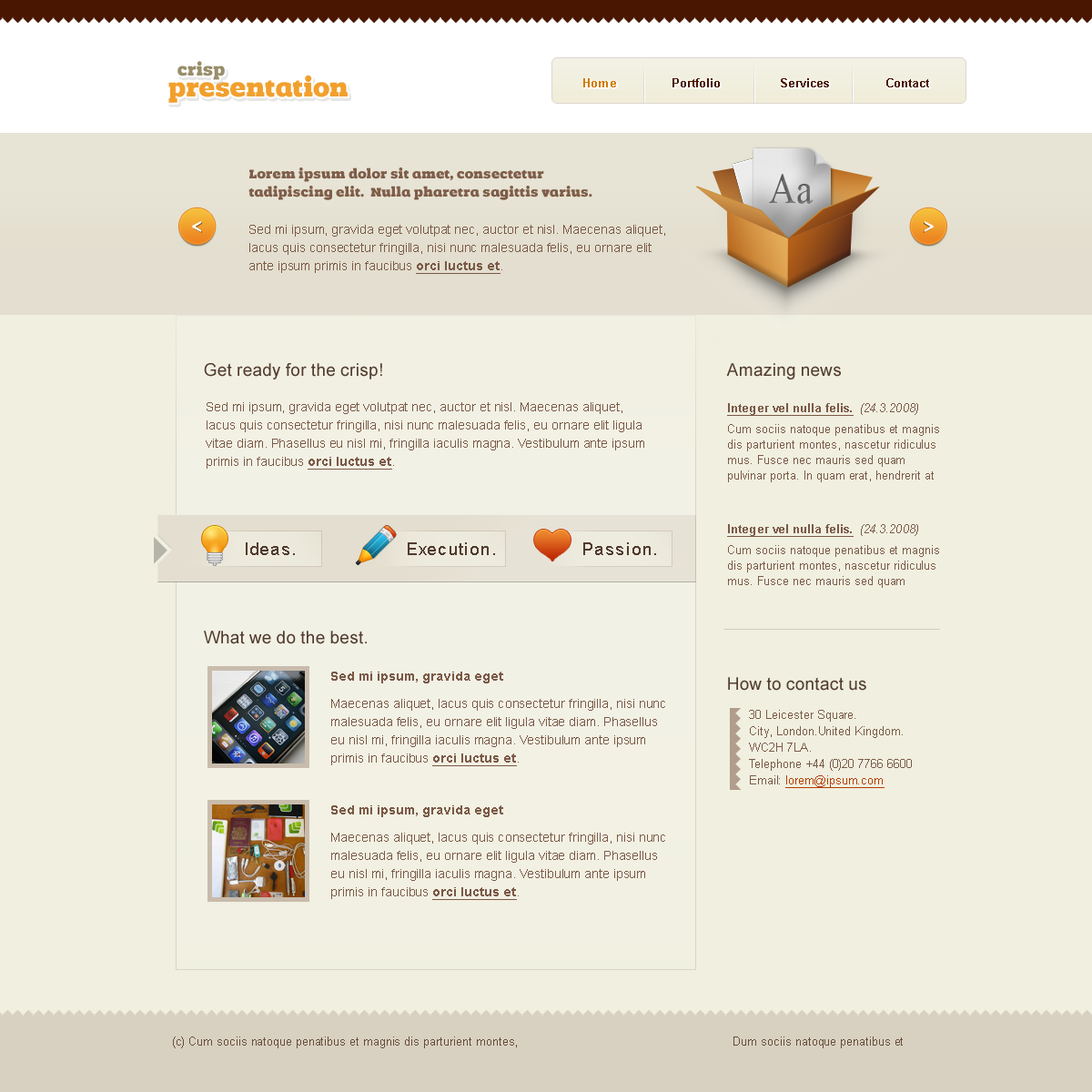
<style>
.page{position:relative;width:1092px;height:1092px;background:#f0efe0}
.page>*{position:absolute;margin:0}
.t1{font:17.6px "Romeral";color:#998d6a}
.t2{font:26.1px "Romeral";color:#f1a02d}
.t3{font:11.8px "Arial-BoldMT";color:#d17b00}
.t4{font:11.8px "Arial-BoldMT";color:#491701}
.t5{font:13.4px/18.2px "Romeral";color:#7f5d49}
.t6{font:41px "TimesNewRomanPSMT";color:#666666;scale:0.91 1}
.t7{font:12.7px/18.2px "ArialMT";color:#7b5a47}
.t8{font:12.7px/18.2px "Arial-BoldMT";color:#7b5a47;text-decoration:underline}
.t9{font:12.7px "ArialMT";color:#7b5a47}
.t10{font:17.2px "ArialMT";color:#523c2f}
.t11{font:11.8px/15.5px "ArialMT";color:#7b5a47}
.t12{font:11.8px/15.5px "Arial-BoldMT";color:#7b5a47;text-decoration:underline}
.t13{font:11.8px/15.5px "Arial-ItalicMT";color:#7b5a47}
.t14{font:11.8px/20.9px "ArialMT";color:#7b5a47}
.t15{font:12.7px/18.2px "Arial-BoldMT";color:#7b5a47}
.t16{font:11.8px/16.4px "ArialMT";color:#7b5a47}
.t17{font:11.8px/16.4px "ArialMT";color:#b44000;text-decoration:underline}
.t18{font:11.8px "ArialMT";color:#694d3c}
</style>
<div class="page">
<p class="t1" style="left:177px;top:61px;width:48px;height:19px">crisp</p>
<p class="t2" style="left:168px;top:75px;width:180px;height:28px">presentation</p>
<p class="t3" style="left:583px;top:78px;width:33px;height:9px">Home</p>
<p class="t4" style="left:672px;top:78px;width:48px;height:9px">Portfolio</p>
<p class="t4" style="left:781px;top:78px;width:48px;height:9px">Services</p>
<p class="t4" style="left:886px;top:78px;width:43px;height:9px">Contact</p>
<p class="t5" style="left:248px;top:167px;width:344px;height:33px">Lorem ipsum dolor sit amet, consectetur <br>tadipiscing elit.  Nulla pharetra sagittis varius.</p>
<p class="t6" style="left:769px;top:174px;width:45px;height:30px">Aa</p>
<p class="t7" style="left:249px;top:225px;width:416px;height:49px">Sed mi ipsum, gravida eget volutpat nec, auctor et nisl. Maecenas aliquet, lacus quis consectetur fringilla, nisi nunc malesuada felis, eu ornare elit ante ipsum primis in faucibus <span class="t8">orci luctus et</span>.<br><span class="t9"><br><br>ultrices posuere cubilia Curae;</span></p>
<p class="t10" style="left:204px;top:363px;width:178px;height:16px">Get ready for the crisp!</p>
<p class="t10" style="left:726px;top:363px;width:115px;height:16px">Amazing news</p>
<p class="t7" style="left:206px;top:402px;width:438px;height:68px">Sed mi ipsum, gravida eget volutpat nec, auctor et nisl. Maecenas aliquet, lacus quis consectetur fringilla, nisi nunc malesuada felis, eu ornare elit ligula vitae diam. Phasellus eu nisl mi, fringilla iaculis magna. Vestibulum ante ipsum primis in faucibus <span class="t8">orci luctus et</span>.<br><br>ultrices posuere cubilia Curae;</p>
<p class="t11" style="left:727px;top:403px;width:212px;height:79px"><span class="t12">Integer vel nulla felis.  </span><span class="t13">(24.3.2008)<br></span><span class="t14">Cum sociis nat</span>oque penatibus et magnis dis parturient montes, nascetur ridiculus mus. Fusce nec mauris sed quam pulvinar porta. In quam erat, hendrerit at dignissim ac, laoreet eu enim.</p>
<p class="t11" style="left:727px;top:524px;width:212px;height:64px"><span class="t12">Integer vel nulla felis.  </span><span class="t13">(24.3.2008)<br></span><span class="t14">Cum sociis nat</span>oque penatibus et magnis dis parturient montes, nascetur ridiculus mus. Fusce nec mauris sed quam pulvinar porta. In quam erat, hendrerit at dignissim ac, laoreet eu enim.</p>
<p class="t10" style="left:246px;top:542px;width:49px;height:13px">Ideas.</p>
<p class="t10" style="left:408px;top:542px;width:87px;height:13px">Execution.</p>
<p class="t10" style="left:583px;top:542px;width:73px;height:13px">Passion.</p>
<p class="t10" style="left:204px;top:631px;width:163px;height:13px">What we do the best.</p>
<p class="t7" style="left:331px;top:672px;width:334px;height:94px"><span class="t15">Sed mi ipsum, gravida eget<br></span>Maecenas aliquet, lacus quis consectetur fringilla, nisi nunc malesuada felis, eu ornare elit ligula vitae diam. Phasellus eu nisl mi, fringilla iaculis magna. Vestibulum ante ipsum primis in faucibus <span class="t8">orci luctus et</span>.<br><br>ultrices posuere cubilia Curae;</p>
<p class="t10" style="left:728px;top:677px;width:138px;height:14px">How to contact us</p>
<p class="t16" style="left:749px;top:710px;width:163px;height:78px">30 Leicester Square. <br>City, London.United Kingdom. <br>WC2H 7LA. <br>Telephone +44 (0)20 7766 6600<br>Email: <span class="t17">lorem@ipsum.com</span></p>
<p class="t7" style="left:331px;top:805px;width:334px;height:95px"><span class="t15">Sed mi ipsum, gravida eget<br></span>Maecenas aliquet, lacus quis consectetur fringilla, nisi nunc malesuada felis, eu ornare elit ligula vitae diam. Phasellus eu nisl mi, fringilla iaculis magna. Vestibulum ante ipsum primis in faucibus <span class="t8">orci luctus et</span>.<br><br>ultrices posuere cubilia Curae;</p>
<p class="t18" style="left:173px;top:1036px;width:344px;height:12px">(c) Cum sociis natoque penatibus et magnis dis parturient montes,</p>
<p class="t18" style="left:733px;top:1036px;width:170px;height:12px">Dum sociis natoque penatibus et</p>
</div>
